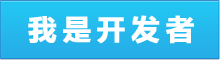
<style>
.page{position:relative;width:220px;height:60px}
.page>*{position:absolute;margin:0}
.t1{font:28px "MicrosoftYaHei";letter-spacing:0.2em;color:#ffffff;font-weight:bold}
</style>
<div class="page">
<p class="t1" style="left:28px;top:15px;width:166px;height:29px">我是开发者</p>
</div>
